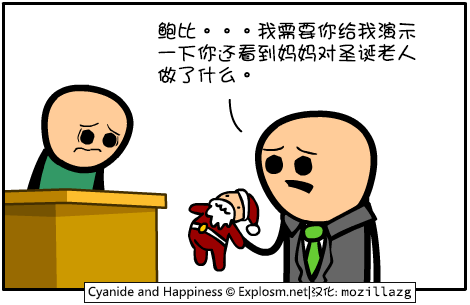
<style>
.page{position:relative;width:470px;height:305px;background:#ffffff}
.page>*{position:absolute;margin:0}
.t1{font:20px/22px "DFGirl";color:#000000}
</style>
<div class="page">
<p class="t1" style="left:158px;top:21px;width:258px;height:63px">鲍比。。。我需要你给我演示<br>一下你还看到妈妈对圣诞老人<br>做了什么。</p>
</div>
